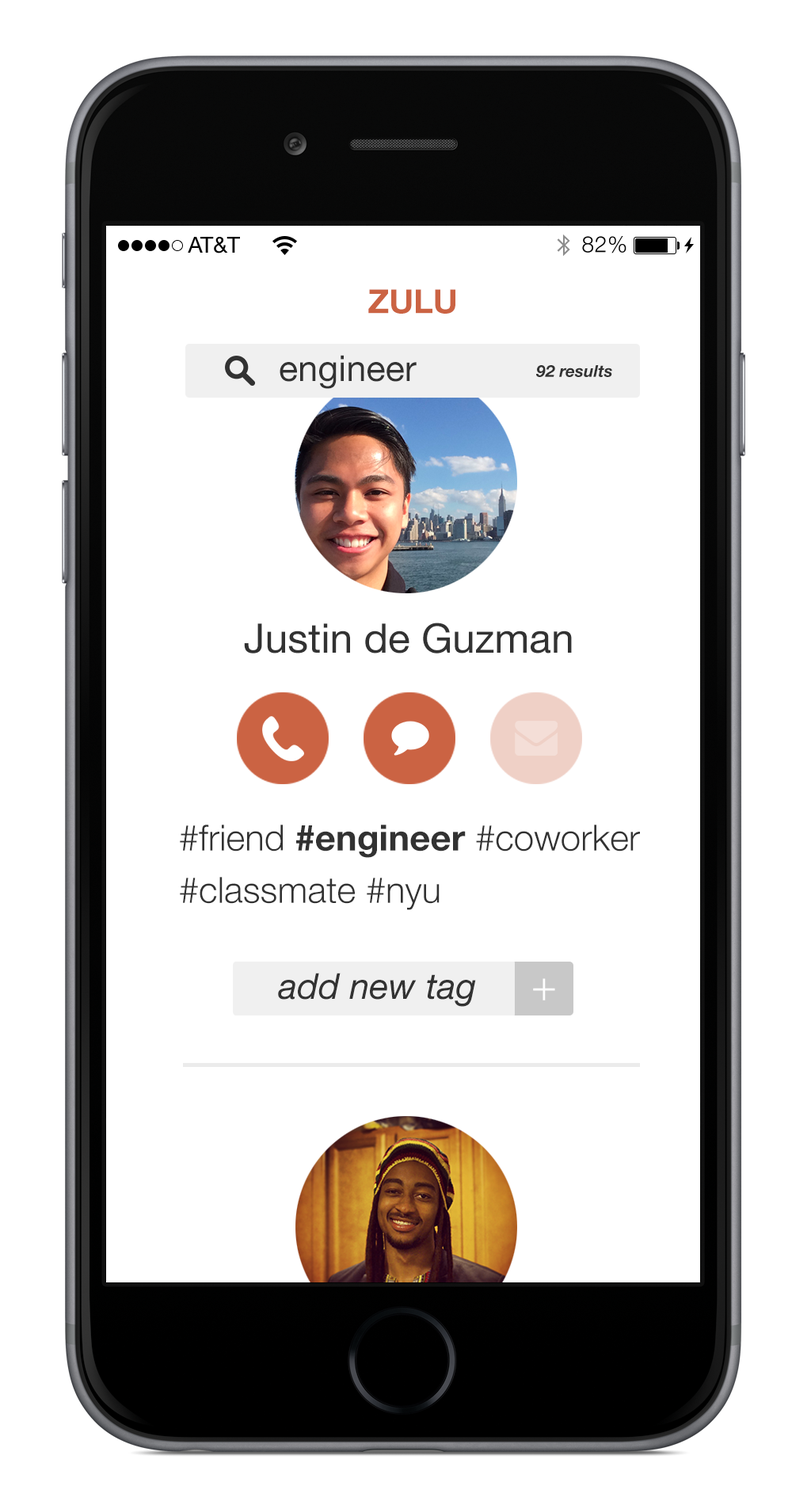
<style>
.page{position:relative;width:792px;height:1505px;background:#ffffff}
.page>*{position:absolute;margin:0}
.t1{font:22.2px "HelveticaNeue";color:#000000;text-transform:uppercase}
.t2{font:22.2px "HelveticaNeue-Light";letter-spacing:0.025em;color:#000000}
.t3{font:33px "HelveticaNeue-Bold";color:#cb6343}
.t4{font:35.8px "HelveticaNeue";color:#323232}
.t5{font:16.5px "HelveticaNeue-BoldItalic";color:#323232}
.t6{font:40.8px "HelveticaNeue";color:#323232}
.t7{font:36px "HelveticaNeue-Bold";color:#323232}
.t8{font:36px "HelveticaNeue-Light";color:#323232}
.t9{font:35.8px "HelveticaNeue-Italic";color:#323232}
.t10{font:42.8px "HelveticaNeue-Light";color:#ffffff}
</style>
<div class="page">
<p class="t1" style="left:188px;top:237px;width:52px;height:17px">AT&amp;T</p>
<p class="t2" style="left:582px;top:236px;width:45px;height:18px">82%</p>
<p class="t3" style="left:368px;top:289px;width:88px;height:25px">ZULU</p>
<p class="t4" style="left:280px;top:355px;width:137px;height:34px">engineer</p>
<p class="t5" style="left:536px;top:365px;width:76px;height:12px">92 results</p>
<p class="t6" style="left:244px;top:623px;width:328px;height:31px">Justin de Guzman</p>
<p class="t7" style="left:180px;top:825px;width:460px;height:33px"><span class="t8">#friend </span>#engineer<span class="t8"> #coworker</span></p>
<p class="t8" style="left:180px;top:877px;width:260px;height:33px">#classmate #nyu</p>
<p class="t9" style="left:278px;top:973px;width:198px;height:34px">add new tag</p>
<p class="t10" style="left:533px;top:978px;width:22px;height:23px">+</p>
</div>
